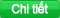
<style>
.page{position:relative;width:60px;height:18px}
.page>*{position:absolute;margin:0}
.t1{font:12px "ArialMT";letter-spacing:-0.04em;color:#fffcfc;font-weight:bold}
</style>
<div class="page">
<p class="t1" style="left:11px;top:1px;width:37px;height:13px">Chi tiết</p>
</div>
